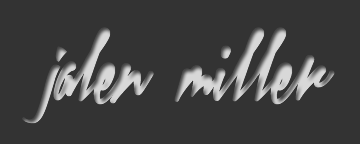
<style>
.page{position:relative;width:360px;height:144px;background:#333333}
.page>*{position:absolute;margin:0}
.t1{font:69.6px "XtreemFatDemo"}
.t2{font:69.6px "KaushanScript-Regular"}
</style>
<div class="page">
<p class="t1" style="left:22px;top:27px;width:313px;height:97px"><span class="t2">j </span>alen miller</p>
</div>
